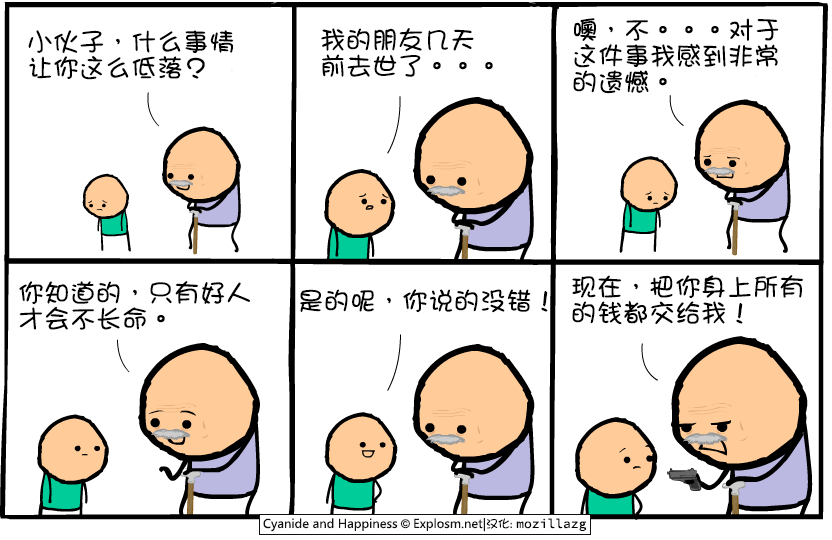
<style>
.page{position:relative;width:832px;height:540px;background:#ffffff}
.page>*{position:absolute;margin:0}
.t1{font:26px/26px "DFGirl";color:#000000}
.t2{font:26px "DFGirl";color:#000000}
</style>
<div class="page">
<p class="t1" style="left:28px;top:30px;width:206px;height:50px">小伙子，什么事情<br>让你这么低落？</p>
<p class="t1" style="left:321px;top:28px;width:172px;height:49px">我的朋友几天<br>前去世了。。。</p>
<p class="t1" style="left:573px;top:18px;width:206px;height:76px">噢，不。。。对于<br>这件事我感到非常<br>的遗憾。</p>
<p class="t1" style="left:19px;top:281px;width:232px;height:49px">你知道的，只有好人<br>才会不长命。</p>
<p class="t1" style="left:572px;top:275px;width:232px;height:50px">现在，把你身上所有<br>的钱都交给我！</p>
<p class="t2" style="left:300px;top:289px;width:248px;height:24px">是的呢，你说的没错！</p>
</div>
